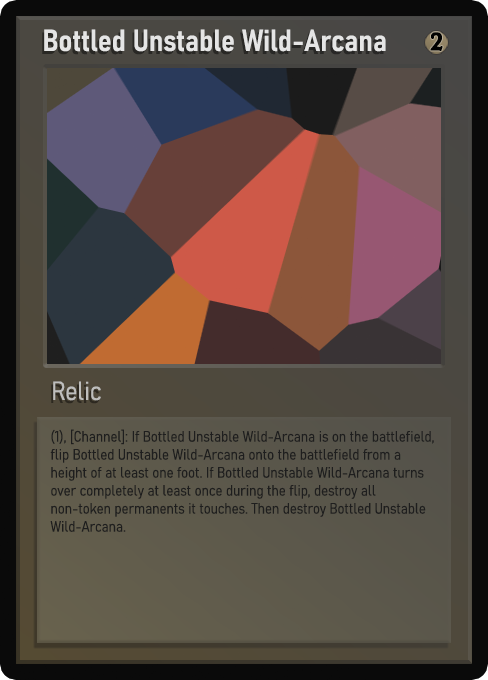
<style>
.page{position:relative;width:488px;height:680px}
.page>*{position:absolute;margin:0}
.t1{font:30px "Bahnschrift-SemiBoldSemiCondensed";color:#f2f2f2;font-weight:bold}
.t2{font:25px "WTRRoycroft";color:#000000;font-weight:bold;scale:1.09 1}
.t3{font:26px "Bahnschrift-LightSemiCondensed";color:#c8c8c8;font-weight:bold}
.t4{font:15px "Bahnschrift-LightSemiCondensed";color:#1e1e1e;font-weight:bold}
</style>
<div class="page">
<p class="t1" style="left:44px;top:29px;width:342px;height:23px;opacity:0.9">Bottled Unstable Wild-Arcana</p>
<p class="t2" style="left:430px;top:32px;width:13px;height:19px">2</p>
<p class="t3" style="left:53px;top:381px;width:48px;height:20px;opacity:0.9">Relic</p>
<p class="t4" style="left:50px;top:429px;width:384px;height:103px">(1), [Channel]: If Bottled Unstable Wild-Arcana is on the battlefield, flip Bottled Unstable Wild-Arcana onto the battlefield from a height of at least one foot. If Bottled Unstable Wild-Arcana turns over completely at least once during the flip, destroy all non-token permanents it touches. Then destroy Bottled Unstable Wild-Arcana.</p>
</div>
